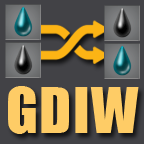
<style>
.page{position:relative;width:144px;height:144px;background:#424246}
.page>*{position:absolute;margin:0}
.t1{font:58px "Impact";letter-spacing:0.025em;color:#fecc66}
</style>
<div class="page">
<p class="t1" style="left:8px;top:86px;width:131px;height:48px">GDIW</p>
</div>
